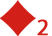
<style>
.page{position:relative;width:52px;height:36px;background:#ffffff}
.page>*{position:absolute;margin:0}
.t1{font:23.4px "MyriadPro-Regular";letter-spacing:-0.1em;color:#d22018;font-weight:bold}
</style>
<div class="page">
<p class="t1" style="left:37px;top:19px;width:11px;height:17px">2</p>
</div>
